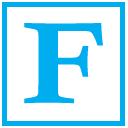
<style>
.page{position:relative;width:128px;height:128px;background:#ffffff}
.page>*{position:absolute;margin:0}
.t1{font:115.7px "CalisMTBol";color:#00aeef;scale:1.12 1}
</style>
<div class="page">
<p class="t1" style="left:24px;top:23px;width:79px;height:81px">F</p>
</div>
